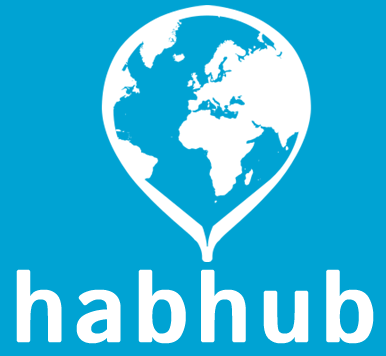
<style>
.page{position:relative;width:386px;height:356px;background:#00a3d3}
.page>*{position:absolute;margin:0}
.t1{font:100.5px "IstokWeb-Bold";letter-spacing:0.05em;color:#ffffff}
</style>
<div class="page">
<p class="t1" style="left:16px;top:269px;width:358px;height:75px">habhub</p>
</div>
